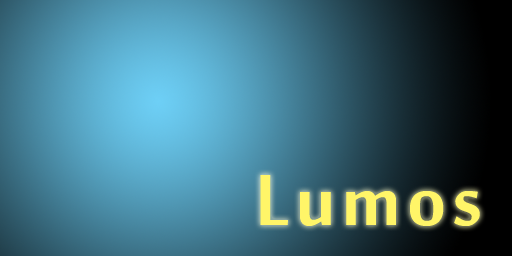
<style>
.page{position:relative;width:512px;height:256px}
.page>*{position:absolute;margin:0}
.t1{font:110px "MoolBoran";letter-spacing:0.05em;color:#fff568}
</style>
<div class="page">
<p class="t1" style="left:260px;top:175px;width:220px;height:51px">Lumos</p>
</div>
